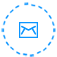
<style>
.page{position:relative;width:57px;height:57px;background:#ffffff}
.page>*{position:absolute;margin:0}
.t1{font:15.8px/18.7px "Lato-Regular";letter-spacing:-0.02em;color:#0c95ff;text-transform:uppercase}
.t2{font:15.8px/18.7px "Lato-Regular";letter-spacing:-0.01em;color:#0c95ff;text-transform:uppercase}
</style>
<div class="page">
<p class="t1" style="left:1px;top:2px;width:55px;height:55px">---------------------<span class="t2">-----</span></p>
</div>
